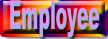
<style>
.page{position:relative;width:108px;height:39px}
.page>*{position:absolute;margin:0}
.t1{font:40px "Arial-Black";scale:0.43 1}
</style>
<div class="page">
<p class="t1" style="left:10px;top:0px;width:90px;height:38px">Employee</p>
</div>
